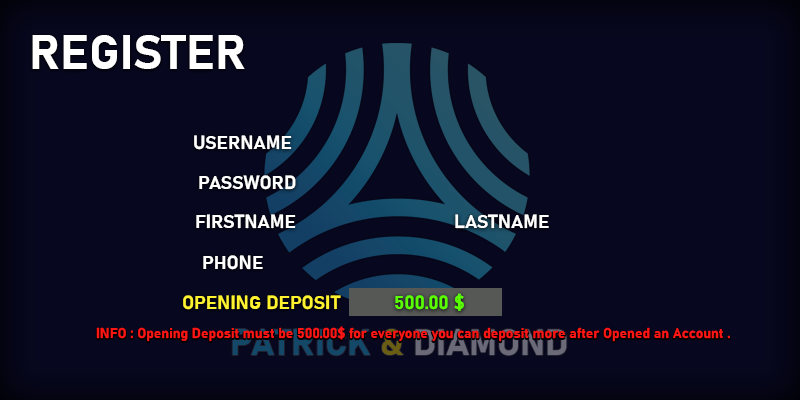
<style>
.page{position:relative;width:800px;height:400px;background:#07071f}
.page>*{position:absolute;margin:0}
.t1{font:48px "Bahnschrift-Bold";color:#ffffff}
.t2{font:19px "Bahnschrift-Bold";color:#ffffff}
.t3{font:19px "Bahnschrift-Bold";color:#5aff00}
.t4{font:19px "Bahnschrift-Bold";color:#fff32f}
.t5{font:14px "Bahnschrift-Bold";color:#ff0000}
</style>
<div class="page">
<p class="t1" style="left:32px;top:35px;width:213px;height:34px">REGISTER</p>
<p class="t2" style="left:194px;top:135px;width:98px;height:15px">USERNAME</p>
<p class="t2" style="left:199px;top:175px;width:97px;height:15px">PASSWORD</p>
<p class="t2" style="left:196px;top:214px;width:100px;height:15px">FIRSTNAME</p>
<p class="t2" style="left:455px;top:214px;width:94px;height:15px">LASTNAME</p>
<p class="t2" style="left:203px;top:255px;width:60px;height:15px">PHONE</p>
<p class="t3" style="left:395px;top:293px;width:69px;height:18px">500.00 $</p>
<p class="t4" style="left:183px;top:295px;width:158px;height:15px">OPENING DEPOSIT</p>
<p class="t5" style="left:96px;top:326px;width:634px;height:16px">INFO : Opening Deposit must be 500.00$ for everyone you can deposit more after Opened an Account .</p>
</div>
